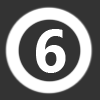
<style>
.page{position:relative;width:100px;height:100px;background:#333333}
.page>*{position:absolute;margin:0}
.t1{font:60px "SegoeUI-Bold";letter-spacing:-0.105em;color:#ffffff}
</style>
<div class="page">
<p class="t1" style="left:36px;top:29px;width:30px;height:44px">6</p>
</div>
